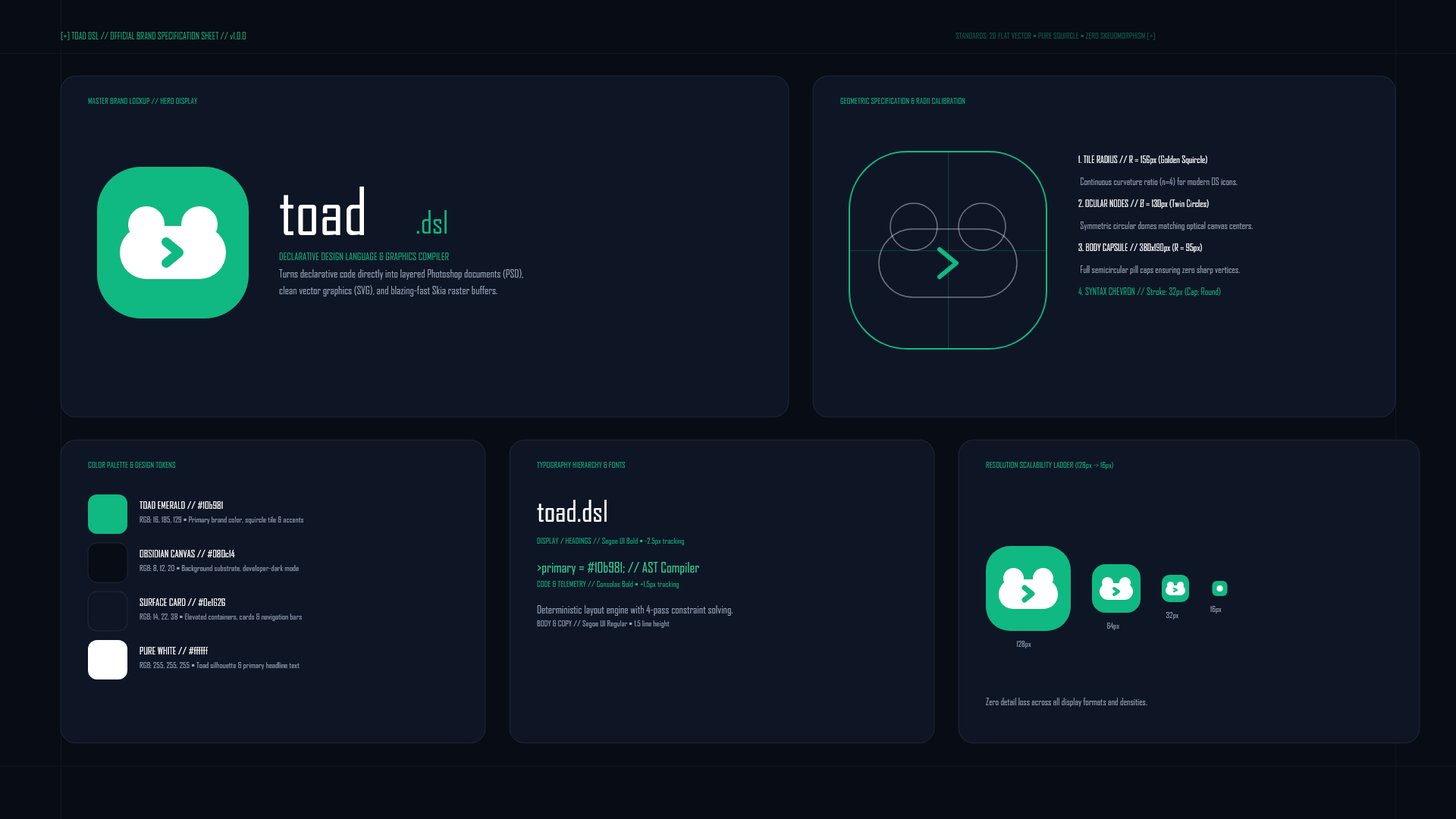
<style>
.page{position:relative;width:1456px;height:819px;background:#0e1626}
.page>*{position:absolute;margin:0}
.t1{font:9.1px "Consolas-Bold";letter-spacing:0.167em;color:#10b981}
.t2{font:8.3px "Consolas-Bold";letter-spacing:0.136em}
.t3{font:8.3px "Consolas-Bold";letter-spacing:0.136em;color:#10b981}
.t4{font:9.1px "Consolas-Bold";color:#ffffff}
.t5{font:63.7px "SegoeUI-Bold";letter-spacing:-0.036em;color:#ffffff}
.t6{font:9.1px "SegoeUI";color:#94a3b8}
.t7{font:30.3px "Consolas-Bold";color:#10b981}
.t8{font:9.1px "Consolas-Bold";color:#f9f9f9}
.t9{font:9.9px "Consolas-Bold";letter-spacing:0.154em;color:#10b981}
.t10{font:10.6px "SegoeUI";color:#94a3b8}
.t11{font:9.1px "Consolas-Bold";color:#10b981}
.t12{font:9.9px "Consolas-Bold";color:#ffffff}
.t13{font:28.8px "SegoeUI-Bold";letter-spacing:-0.039em;color:#ffffff}
.t14{font:8.3px "SegoeUI";color:#94a3b8}
.t15{font:8.3px "Consolas";color:#10b981}
.t16{font:13.6px "Consolas-Bold";color:#34d399}
.t17{font:8.3px "Consolas-Bold";color:#94a3b8}
.t18{font:8.3px "Consolas-Bold"}
.t19{font:8.3px "Consolas";color:#94a3b8}
</style>
<div class="page">
<p class="t1" style="left:61px;top:32px;width:389px;height:11px">[+] TOAD DSL // OFFICIAL BRAND SPECIFICATION SHEET // v1.0.0</p>
<p class="t2" style="left:955px;top:32px;width:377px;height:10px">STANDARDS: 2D FLAT VECTOR • PURE SQUIRCLE • ZERO SKEUOMORPHISM [+]</p>
<p class="t3" style="left:88px;top:97px;width:199px;height:11px">MASTER BRAND LOCKUP // HERO DISPLAY</p>
<p class="t3" style="left:840px;top:97px;width:246px;height:11px">GEOMETRIC SPECIFICATION &amp; RADII CALIBRATION</p>
<p class="t4" style="left:1078px;top:155px;width:226px;height:12px">1. TILE RADIUS // R = 156px (Golden Squircle)</p>
<p class="t5" style="left:279px;top:184px;width:130px;height:79px">toad</p>
<p class="t6" style="left:1078px;top:177px;width:227px;height:12px">Continuous curvature ratio (n=4) for modern OS icons.</p>
<p class="t7" style="left:416px;top:209px;width:66px;height:38px">.dsl</p>
<p class="t4" style="left:1078px;top:199px;width:216px;height:12px">2. OCULAR NODES // Ø = 130px (Twin Circles)</p>
<p class="t6" style="left:1078px;top:221px;width:244px;height:12px">Symmetric circular domes matching optical canvas centers.</p>
<p class="t8" style="left:1078px;top:243px;width:196px;height:12px">3. BODY CAPSULE // 380x190px (R = 95px)</p>
<p class="t9" style="left:279px;top:252px;width:325px;height:12px">DECLARATIVE DESIGN LANGUAGE &amp; GRAPHICS COMPILER</p>
<p class="t10" style="left:279px;top:268px;width:440px;height:34px">Turns declarative code directly into layered Photoshop documents (PSD),<br>clean vector graphics (SVG), and blazing-fast Skia raster buffers.</p>
<p class="t6" style="left:1078px;top:265px;width:224px;height:12px">Full semicircular pill caps ensuring zero sharp vertices.</p>
<p class="t11" style="left:1078px;top:287px;width:231px;height:12px">4. SYNTAX CHEVRON // Stroke: 32px (Cap: Round)</p>
<p class="t3" style="left:88px;top:461px;width:165px;height:11px">COLOR PALETTE &amp; DESIGN TOKENS</p>
<p class="t3" style="left:537px;top:461px;width:159px;height:11px">TYPOGRAPHY HIERARCHY &amp; FONTS</p>
<p class="t3" style="left:986px;top:461px;width:257px;height:11px">RESOLUTION SCALABILITY LADDER (128px -&gt; 16px)</p>
<p class="t12" style="left:140px;top:500px;width:125px;height:13px">TOAD EMERALD // #10b981</p>
<p class="t13" style="left:537px;top:499px;width:101px;height:36px">toad.dsl</p>
<p class="t14" style="left:140px;top:516px;width:229px;height:10px">RGB: 16, 185, 129 • Primary brand color, squircle tile &amp; accents</p>
<p class="t15" style="left:537px;top:537px;width:243px;height:11px">DISPLAY / HEADINGS // Segoe UI Bold • -2.5px tracking</p>
<p class="t12" style="left:140px;top:549px;width:141px;height:12px">OBSIDIAN CANVAS // #080c14</p>
<p class="t14" style="left:140px;top:564px;width:222px;height:11px">RGB: 8, 12, 20 • Background substrate, developer-dark mode</p>
<p class="t16" style="left:537px;top:561px;width:263px;height:18px">&gt;primary = #10b981; // AST Compiler</p>
<p class="t15" style="left:537px;top:580px;width:234px;height:11px">CODE &amp; TELEMETRY // Consolas Bold • +1.5px tracking</p>
<p class="t12" style="left:140px;top:598px;width:125px;height:12px">SURFACE CARD // #0e1626</p>
<p class="t10" style="left:537px;top:604px;width:273px;height:14px">Deterministic layout engine with 4-pass constraint solving.</p>
<p class="t17" style="left:1210px;top:605px;width:19px;height:11px">16px</p>
<p class="t14" style="left:140px;top:613px;width:225px;height:10px">RGB: 14, 22, 38 • Elevated containers, cards &amp; navigation bars</p>
<p class="t18" style="left:1166px;top:611px;width:19px;height:11px">32px</p>
<p class="t19" style="left:537px;top:620px;width:225px;height:10px">BODY &amp; COPY // Segoe UI Regular • 1.5 line height</p>
<p class="t18" style="left:1107px;top:622px;width:19px;height:10px">64px</p>
<p class="t18" style="left:1017px;top:640px;width:23px;height:11px">128px</p>
<p class="t12" style="left:140px;top:646px;width:114px;height:12px">PURE WHITE // #ffffff</p>
<p class="t14" style="left:140px;top:661px;width:222px;height:11px">RGB: 255, 255, 255 • Toad silhouette &amp; primary headline text</p>
<p class="t6" style="left:986px;top:698px;width:221px;height:11px">Zero detail loss across all display formats and densities.</p>
</div>
